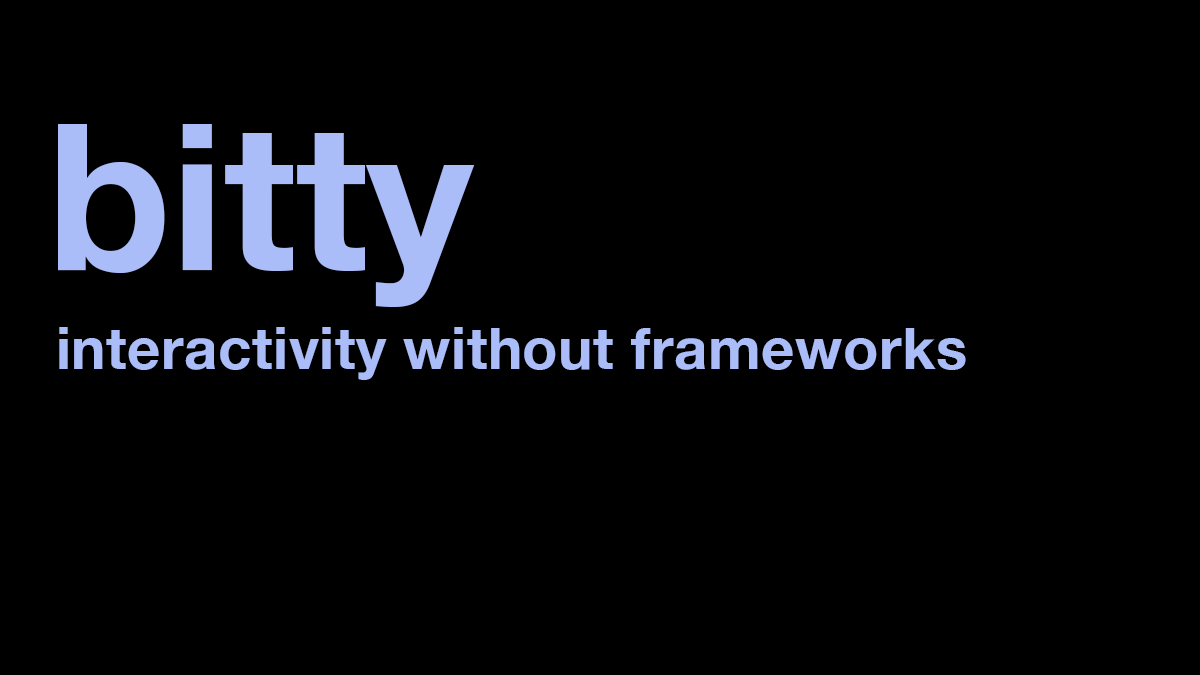
<style>
.page{position:relative;width:1200px;height:675px;background:#000000}
.page>*{position:absolute;margin:0}
.t1{font:204px "HelveticaNeue-Bold";color:#abbdf8}
.t2{font:58px "HelveticaNeue-Bold";letter-spacing:0.01em;color:#abbdf8}
</style>
<div class="page">
<p class="t1" style="left:58px;top:124px;width:417px;height:183px">bitty</p>
<p class="t2" style="left:59px;top:327px;width:907px;height:53px">interactivity without frameworks</p>
</div>
